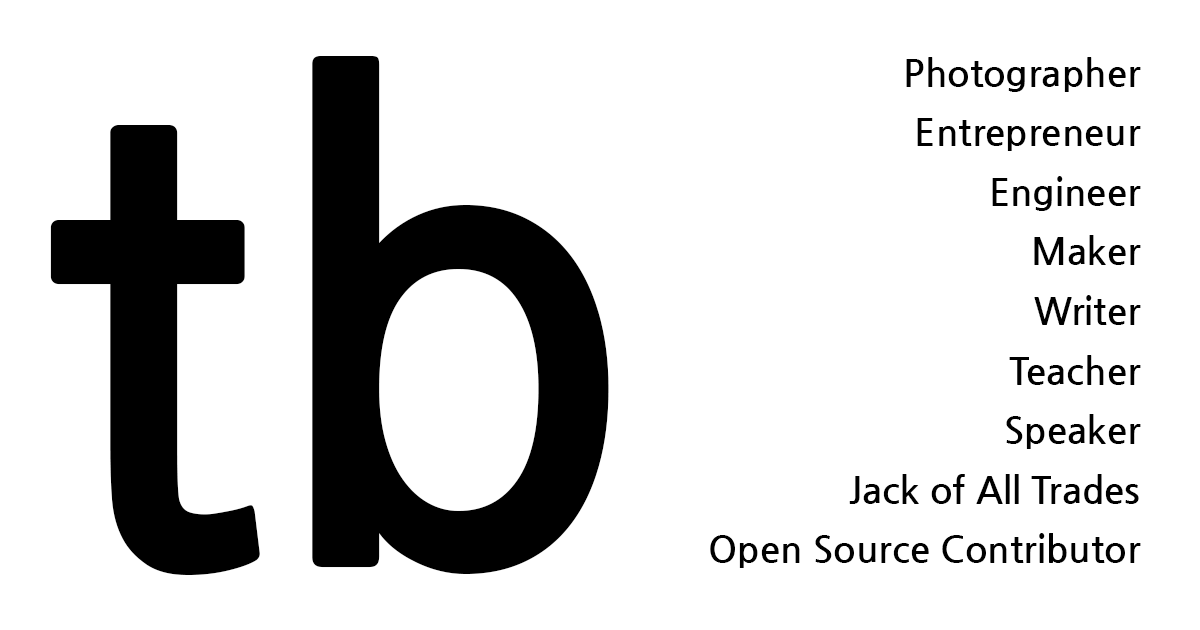
<style>
.page{position:relative;width:1200px;height:630px;background:#ffffff}
.page>*{position:absolute;margin:0}
.t1{font:625px "NanumGothicBold";color:#000000}
.t2{font:37.1px/59.6px "NanumGothicBold";color:#000000}
</style>
<div class="page">
<p class="t1" style="left:50px;top:56px;width:559px;height:519px">tb</p>
<p class="t2" style="left:710px;top:57px;width:431px;height:511px;text-align:right">Photographer<br>Entrepreneur<br>Engineer<br>Maker<br>Writer<br>Teacher<br>Speaker<br>Jack of All Trades<br>Open Source Contributor</p>
</div>
